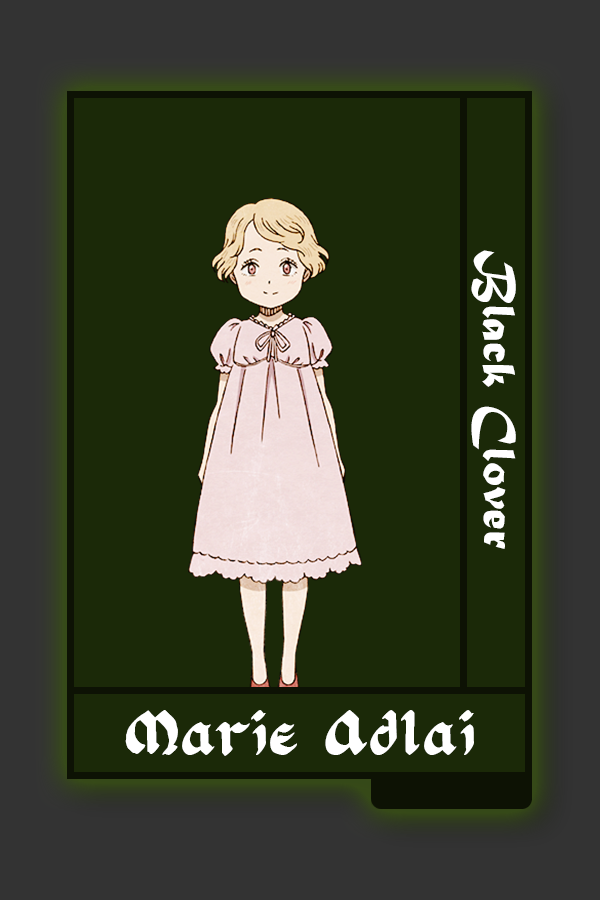
<style>
.page{position:relative;width:600px;height:900px;background:#1b2908}
.page>*{position:absolute;margin:0}
.t1{font:48.8px "MaturaMTScriptCapitals";color:#ffffff}
.t2{font:54.8px "FloranteatLaura";color:#ffffff}
</style>
<div class="page">
<p class="t1" style="left:471px;top:250px;width:45px;height:299px;rotate:90deg">Black Clover</p>
<p class="t2" style="left:125px;top:710px;width:349px;height:46px">Marie Adlai</p>
</div>
